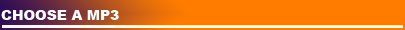
<style>
.page{position:relative;width:405px;height:30px;background:#ff7c00}
.page>*{position:absolute;margin:0}
.t1{font:13.9px "Arial-Black";color:#ffffff}
</style>
<div class="page">
<p class="t1" style="left:1px;top:10px;width:118px;height:10px">CHOOSE A MP3</p>
</div>
